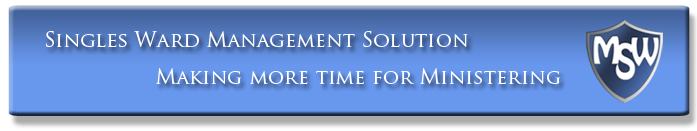
<style>
.page{position:relative;width:697px;height:131px;background:#6898ee}
.page>*{position:absolute;margin:0}
.t1{font:20.2px "TrajanPro-Regular";color:#ffffff;font-variant:small-caps}
</style>
<div class="page">
<p class="t1" style="left:46px;top:31px;width:422px;height:17px">Singles Ward Management Solution</p>
<p class="t1" style="left:156px;top:68px;width:405px;height:16px">Making more time for Ministering</p>
</div>
